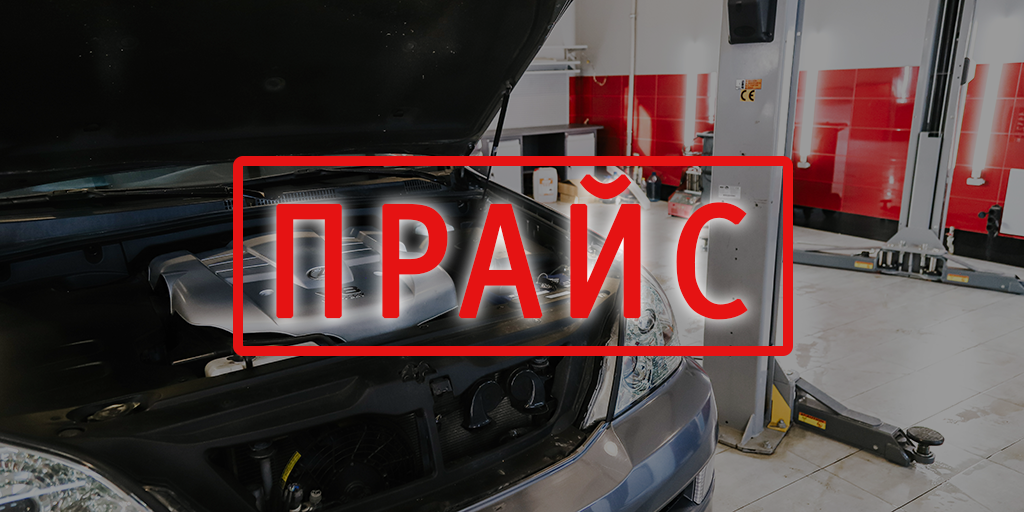
<style>
.page{position:relative;width:1024px;height:512px}
.page>*{position:absolute;margin:0}
.t1{font:160px "MetaPro-CondBook";letter-spacing:0.1em;color:#e51313;font-weight:bold}
</style>
<div class="page">
<p class="t1" style="left:276px;top:174px;width:472px;height:146px">ПРАЙС</p>
</div>
